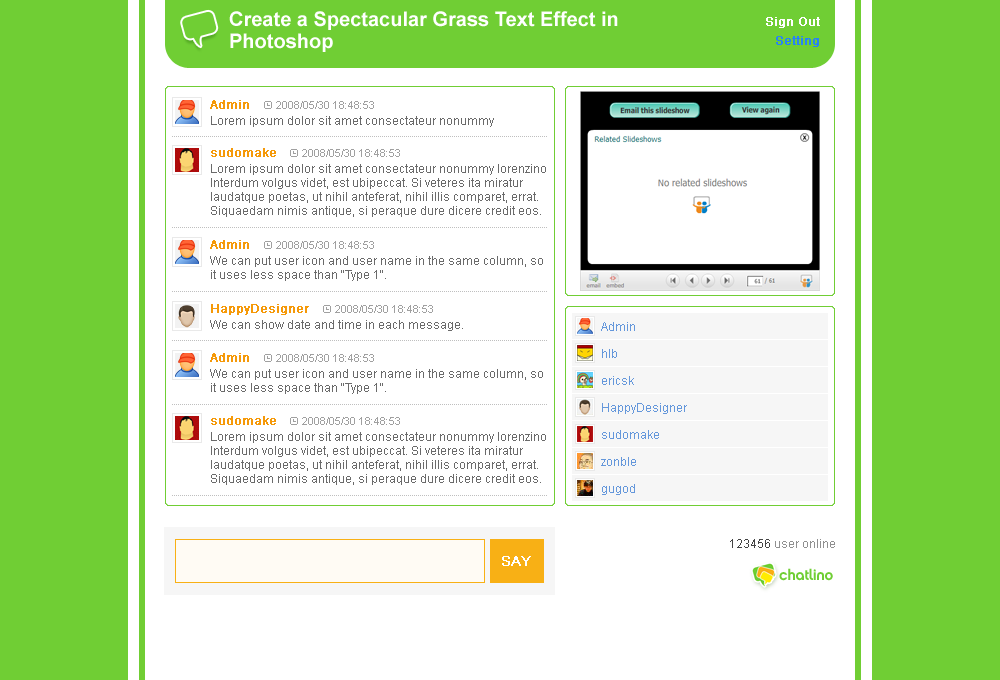
<style>
.page{position:relative;width:1000px;height:680px;background:#ffffff}
.page>*{position:absolute;margin:0}
.t1{font:20px/22px "Arial-BoldMT";color:#ffffff}
.t2{font:12px "ArialMT";color:#ffffff;font-weight:bold}
.t3{font:12px "ArialMT";color:#2883f4;font-weight:bold}
.t4{font:12px "ArialMT";color:#f59909;font-weight:bold}
.t5{font:11px "ArialMT";color:#a0a0a0}
.t6{font:12px "ArialMT";color:#6a6a6a}
.t7{font:12px/14px "ArialMT";color:#6a6a6a}
.t8{font:12px "ArialMT";color:#6497db}
.t9{font:12px "ArialMT";color:#909090}
.t10{font:12px "ArialMT";color:#444444}
.t11{font:14px "ArialMT";color:#ffffff;text-transform:uppercase;font-weight:bold}
.t12{font:15px "Chalet-NewYorkNineteenSeventy";letter-spacing:-0.025em;color:#70ce34}
</style>
<div class="page">
<p class="t1" style="left:229px;top:11px;width:389px;height:41px">Create a Spectacular Grass Text Effect in <br>Photoshop</p>
<p class="t2" style="left:766px;top:17px;width:54px;height:11px">Sign Out</p>
<p class="t3" style="left:776px;top:36px;width:43px;height:11px">Setting</p>
<p class="t4" style="left:210px;top:100px;width:39px;height:9px">Admin</p>
<p class="t5" style="left:276px;top:101px;width:98px;height:8px">2008/05/30 18:48:53</p>
<p class="t6" style="left:211px;top:116px;width:283px;height:11px">Lorem ipsum dolor sit amet consectateur nonummy</p>
<p class="t4" style="left:211px;top:148px;width:65px;height:9px">sudomake</p>
<p class="t5" style="left:302px;top:149px;width:98px;height:8px">2008/05/30 18:48:53</p>
<p class="t7" style="left:211px;top:164px;width:335px;height:53px">Lorem ipsum dolor sit amet consectateur nonummy lorenzino<br>Interdum volgus videt, est ubipeccat. Si veteres ita miratur <br>laudatque poetas, ut nihil anteferat, nihil illis comparet, errat. <br>Siquaedam nimis antique, si peraque dure dicere credit eos.</p>
<p class="t4" style="left:210px;top:240px;width:39px;height:9px">Admin</p>
<p class="t5" style="left:276px;top:241px;width:98px;height:8px">2008/05/30 18:48:53</p>
<p class="t6" style="left:210px;top:256px;width:333px;height:25px">We can put user icon and user name in the same column, so <br>it uses less space than "Type 1".</p>
<p class="t4" style="left:211px;top:304px;width:98px;height:11px">HappyDesigner</p>
<p class="t5" style="left:335px;top:305px;width:98px;height:8px">2008/05/30 18:48:53</p>
<p class="t6" style="left:210px;top:320px;width:253px;height:11px">We can show date and time in each message.</p>
<p class="t8" style="left:601px;top:322px;width:34px;height:9px">Admin</p>
<p class="t4" style="left:210px;top:353px;width:39px;height:9px">Admin</p>
<p class="t8" style="left:602px;top:349px;width:15px;height:9px">hlb</p>
<p class="t5" style="left:276px;top:354px;width:98px;height:8px">2008/05/30 18:48:53</p>
<p class="t6" style="left:210px;top:369px;width:333px;height:25px">We can put user icon and user name in the same column, so <br>it uses less space than "Type 1".</p>
<p class="t8" style="left:602px;top:376px;width:32px;height:9px">ericsk</p>
<p class="t8" style="left:602px;top:403px;width:85px;height:11px">HappyDesigner</p>
<p class="t4" style="left:211px;top:416px;width:65px;height:9px">sudomake</p>
<p class="t5" style="left:302px;top:417px;width:98px;height:8px">2008/05/30 18:48:53</p>
<p class="t7" style="left:211px;top:432px;width:335px;height:53px">Lorem ipsum dolor sit amet consectateur nonummy lorenzino<br>Interdum volgus videt, est ubipeccat. Si veteres ita miratur <br>laudatque poetas, ut nihil anteferat, nihil illis comparet, errat. <br>Siquaedam nimis antique, si peraque dure dicere credit eos.</p>
<p class="t8" style="left:602px;top:430px;width:57px;height:9px">sudomake</p>
<p class="t8" style="left:601px;top:457px;width:35px;height:9px">zonble</p>
<p class="t8" style="left:602px;top:484px;width:33px;height:11px">gugod</p>
<p class="t9" style="left:730px;top:539px;width:105px;height:9px"><span class="t10">123456 </span>user online</p>
<p class="t11" style="left:502px;top:556px;width:29px;height:10px">say</p>
<p class="t12" style="left:779px;top:568px;width:54px;height:13px">chatlino</p>
</div>
